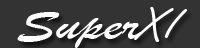
<style>
.page{position:relative;width:200px;height:48px;background:#333333}
.page>*{position:absolute;margin:0}
.t1{font:45.7px "BrushScriptMT";color:#ffffff;scale:1.32 1}
.t2{font:45.7px "FreestyleScript-Regular";color:#ffffff;scale:1.32 1}
</style>
<div class="page">
<p class="t1" style="left:17px;top:7px;width:171px;height:41px">Super<span class="t2">XI</span></p>
</div>
